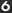
<style>
.page{position:relative;width:12px;height:13px}
.page>*{position:absolute;margin:0}
.t1{font:13.9px "K2D-ExtraBold";color:#ffffff}
</style>
<div class="page">
<p class="t1" style="left:1px;top:1px;width:9px;height:11px">6</p>
</div>
